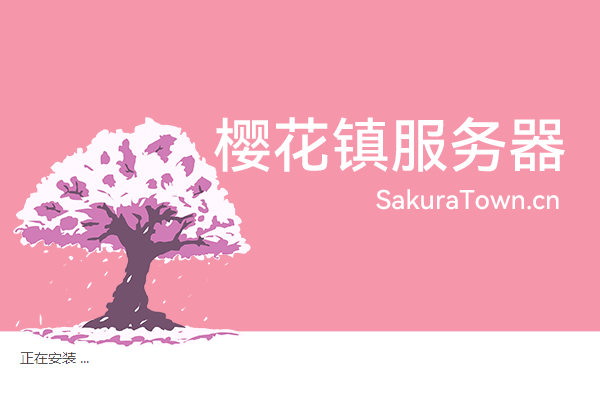
<style>
.page{position:relative;width:600px;height:400px;background:#f596aa}
.page>*{position:absolute;margin:0}
.t1{font:59px "HarmonyOS_Sans_SC_Medium";color:#ffffff}
.t2{font:26px "HarmonyOS_Sans_SC_Medium";color:#ffffff}
</style>
<div class="page">
<p class="t1" style="left:214px;top:116px;width:351px;height:56px">樱花镇服务器</p>
<p class="t2" style="left:376px;top:189px;width:183px;height:21px">SakuraTown.cn</p>
</div>
